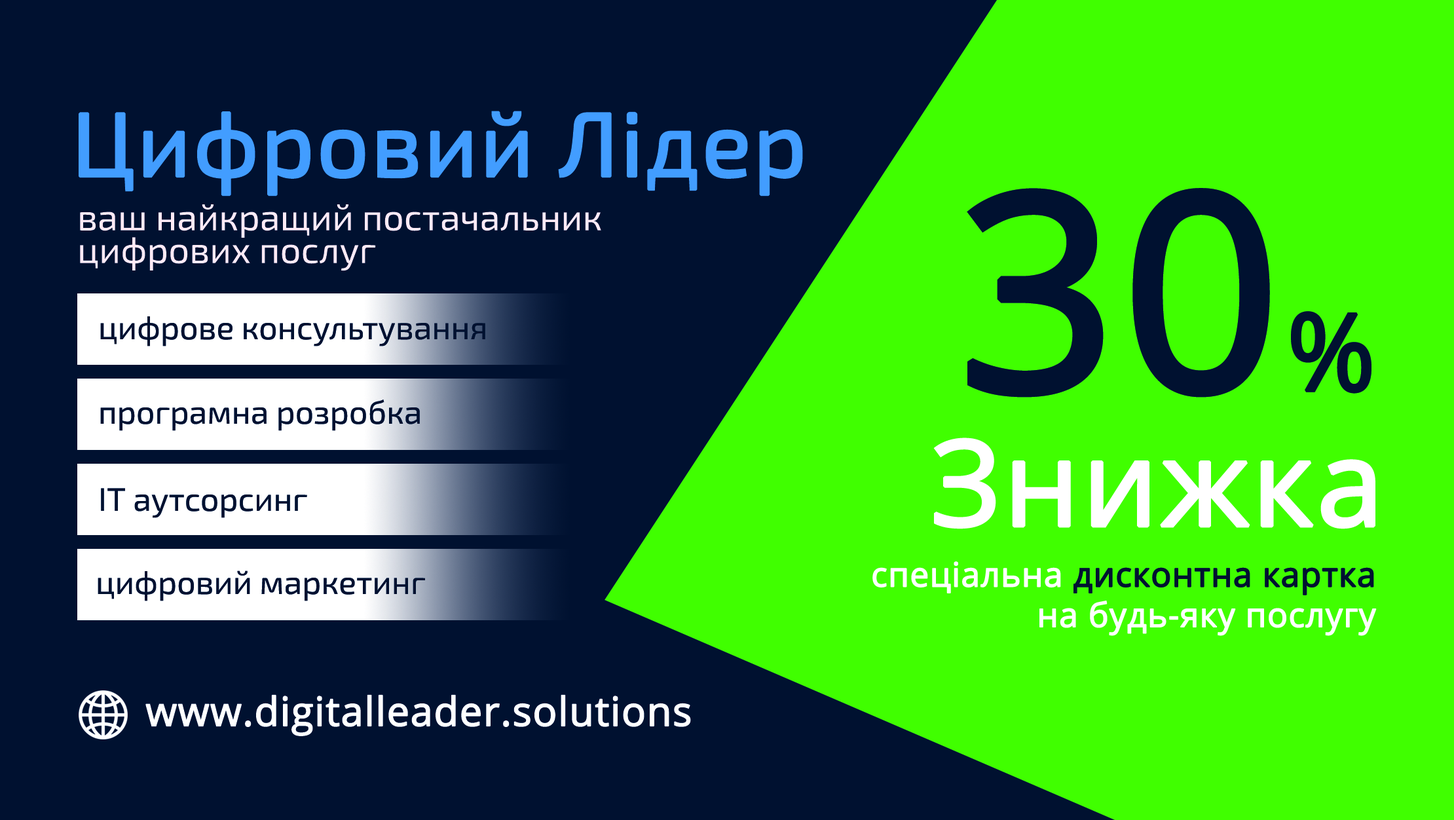
<style>
.page{position:relative;width:1454px;height:820px;background:#001130}
.page>*{position:absolute;margin:0}
.t1{font:91.1px "Exo2-Regular";color:#429dff;font-weight:bold}
.t2{font:274.3px "OpenSans";color:#001130;font-weight:bold}
.t3{font:107.5px "OpenSans";color:#001130;font-weight:bold}
.t4{font:36.7px/32.7px "Exo2-Regular";color:#ffeaf5}
.t5{font:32.7px "Exo2-Regular";color:#001130}
.t6{font:119.1px "OpenSans";color:#ffffff;font-weight:bold}
.t7{font:33.7px "OpenSans";color:#ffffff;font-weight:bold}
.t8{font:33.7px "OpenSans";color:#001130;font-weight:bold}
.t9{font:40.2px "OpenSans";color:#ffffff;font-weight:bold}
</style>
<div class="page">
<p class="t1" style="left:79px;top:111px;width:724px;height:85px">Цифровий Лідер</p>
<p class="t2" style="left:967px;top:188px;width:405px;height:210px">30<span class="t3">%</span></p>
<p class="t4" style="left:80px;top:204px;width:521px;height:67px">ваш найкращий постачальник <br>цифрових послуг</p>
<p class="t5" style="left:100px;top:316px;width:385px;height:30px">цифрове консультування</p>
<p class="t5" style="left:100px;top:400px;width:320px;height:31px">програмна розробка</p>
<p class="t6" style="left:933px;top:438px;width:442px;height:91px">Знижка</p>
<p class="t5" style="left:101px;top:488px;width:206px;height:30px">ІТ аутсорсинг</p>
<p class="t7" style="left:872px;top:561px;width:505px;height:75px;text-align:right">спеціальна <span class="t8">дисконтна картка</span><br>на будь-яку послугу</p>
<p class="t5" style="left:98px;top:571px;width:327px;height:30px">цифровий маркетинг</p>
<p class="t9" style="left:145px;top:694px;width:546px;height:42px">www.digitalleader.solutions</p>
</div>
